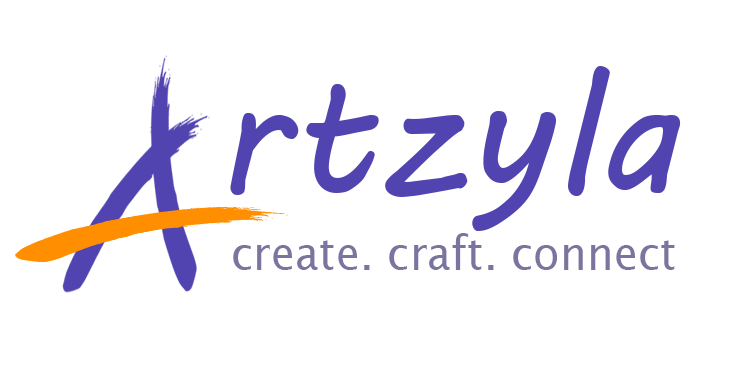
<style>
.page{position:relative;width:740px;height:385px;background:#ffffff}
.page>*{position:absolute;margin:0}
.t1{font:170px "MVBoli";color:#5244b0}
.t2{font:48px "LucidaSans";color:#7a759e;scale:0.91 1}
</style>
<div class="page">
<p class="t1" style="left:230px;top:66px;width:451px;height:165px">rtzyla</p>
<p class="t2" style="left:233px;top:233px;width:442px;height:37px">create. craft. connect</p>
</div>
